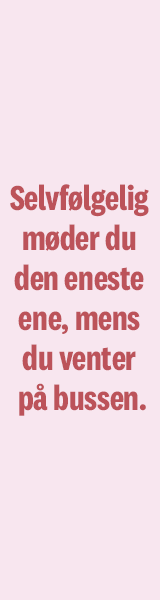
<style>
.page{position:relative;width:160px;height:600px;background:#f8e6ef}
.page>*{position:absolute;margin:0}
.t1{font:36px/40px "National2Condensed-Bold";letter-spacing:-0.008em;color:#bc535a}
</style>
<div class="page">
<p class="t1" style="left:10px;top:184px;width:139px;height:232px;text-align:center">Selvfølgelig <br>møder du <br>den eneste <br>ene, mens <br>du venter <br>på bussen.</p>
</div>
